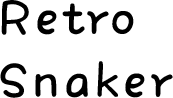
<style>
.page{position:relative;width:173px;height:98px;background:#ffffff}
.page>*{position:absolute;margin:0}
.t1{font:62.5px/62.5px "HYLiLiTiW";letter-spacing:0.06em;color:#000000}
</style>
<div class="page">
<p class="t1" style="left:0px;top:0px;width:173px;height:98px">Retro <br>Snaker</p>
</div>
